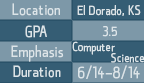
<style>
.page{position:relative;width:144px;height:83px;background:#7d98a8}
.page>*{position:absolute;margin:0}
.t1{font:12px "qontra-Regular";color:#dce4e8}
.t2{font:13.3px "qontra-Regular";color:#dce4e8}
.t3{font:12.7px "qontra-Regular";color:#dce4e8}
</style>
<div class="page">
<p class="t1" style="left:12px;top:3px;width:48px;height:13px">Location</p>
<p class="t2" style="left:77px;top:5px;width:64px;height:11px">El Dorado, KS</p>
<p class="t1" style="left:25px;top:25px;width:22px;height:13px">GPA</p>
<p class="t2" style="left:102px;top:26px;width:15px;height:11px">3.5</p>
<p class="t3" style="left:72px;top:41px;width:43px;height:14px">Computer</p>
<p class="t1" style="left:11px;top:45px;width:53px;height:17px">Emphasis</p>
<p class="t3" style="left:111px;top:53px;width:33px;height:10px">Science</p>
<p class="t1" style="left:13px;top:65px;width:48px;height:13px">Duration</p>
<p class="t1" style="left:78px;top:65px;width:62px;height:14px">6/14-8/14</p>
</div>
